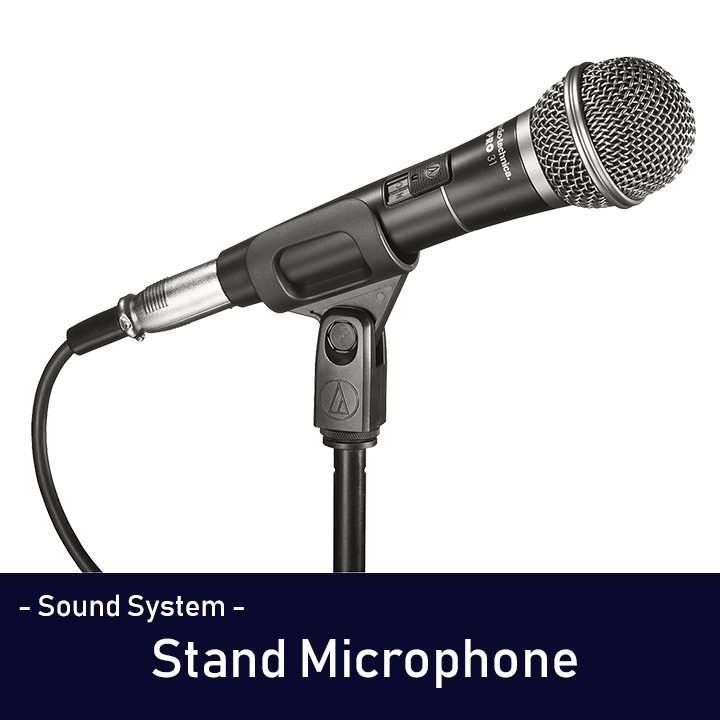
<style>
.page{position:relative;width:720px;height:720px;background:#ffffff}
.page>*{position:absolute;margin:0}
.t1{font:30px "Bahnschrift";color:#ffffff}
.t2{font:53.6px "Bahnschrift";color:#ffffff}
</style>
<div class="page">
<p class="t1" style="left:19px;top:594px;width:225px;height:29px">- Sound System -</p>
<p class="t2" style="left:152px;top:638px;width:425px;height:50px">Stand Microphone</p>
</div>
